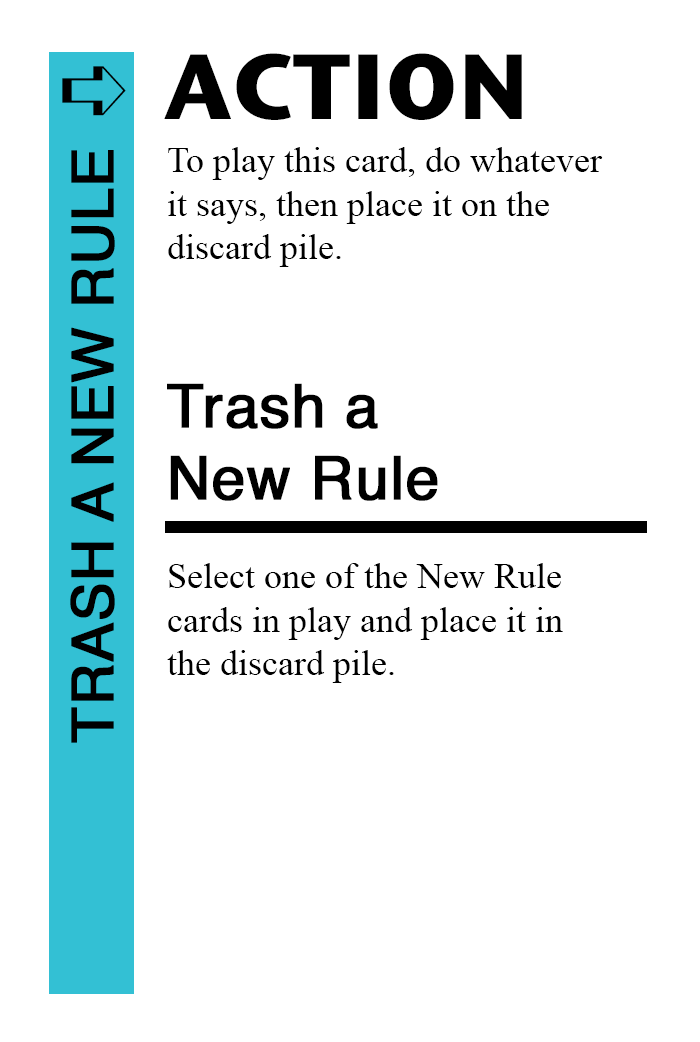
<style>
.page{position:relative;width:700px;height:1042px;background:#ffffff}
.page>*{position:absolute;margin:0}
.t1{font:92px "StoneSansITC-Bold";color:#000000}
.t2{font:82px "MS-Gothic";color:#000000}
.t3{font:58px "Helvetica";color:#000000;font-weight:bold}
.t4{font:36px "TimesNewRomanPSMT";color:#000000}
.t5{font:60px "Helvetica";color:#000000;font-weight:bold}
</style>
<div class="page">
<p class="t1" style="left:164px;top:53px;width:358px;height:67px">ACTION</p>
<p class="t2" style="left:62px;top:66px;width:64px;height:50px">➪</p>
<p class="t3" style="left:70px;top:150px;width:45px;height:593px;rotate:-90deg">TRASH A NEW RULE</p>
<p class="t4" style="left:168px;top:147px;width:435px;height:120px">To play this card, do whatever<br>it says, then place it on the<br>discard pile.</p>
<p class="t5" style="left:167px;top:383px;width:271px;height:118px">Trash a<br>New Rule</p>
<p class="t4" style="left:167px;top:563px;width:396px;height:120px">Select one of the New Rule<br>cards in play and place it in<br>the discard pile.</p>
</div>
